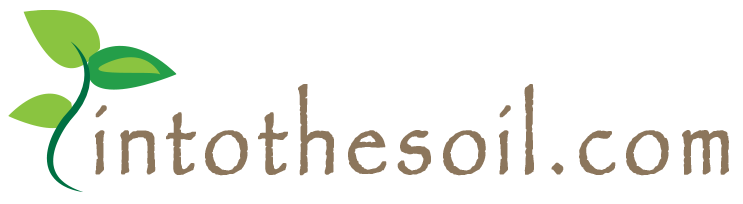
<style>
.page{position:relative;width:743px;height:204px;background:#ffffff}
.page>*{position:absolute;margin:0}
.t1{font:93.8px "Papyrus";letter-spacing:0.1em;color:#8c765c;font-weight:bold;scale:0.8 1}
</style>
<div class="page">
<p class="t1" style="left:95px;top:84px;width:634px;height:92px">intothesoil.com</p>
</div>
